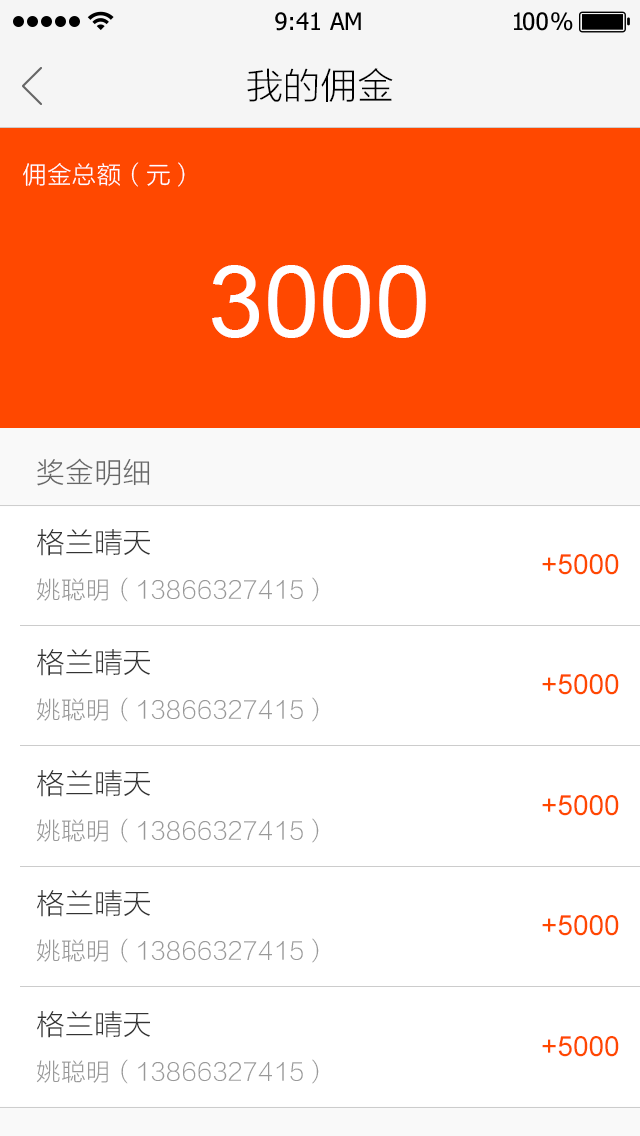
<style>
.page{position:relative;width:640px;height:1136px;background:#ffffff}
.page>*{position:absolute;margin:0}
.t1{font:24px "Tahoma";color:#000000}
.t2{font:24px "Tahoma";letter-spacing:-0.1em;color:#000000}
.t3{font:24px "Tahoma";letter-spacing:-0.25em;color:#000000}
.t4{font:36px "STHeitiSC-Light";color:#000000}
.t5{font:24px "STHeitiSC-Light";color:#ffffff}
.t6{font:100px "ArialMT";color:#ffffff}
.t7{font:28px "STHeitiSC-Light";color:#666666}
.t8{font:28px "STHeitiSC-Light";color:#333333}
.t9{font:28px "ArialMT";color:#ff4800}
.t10{font:24px "STHeitiSC-Light";color:#999999}
</style>
<div class="page">
<p class="t1" style="left:275px;top:12px;width:86px;height:19px">9:41 AM</p>
<p class="t2" style="left:514px;top:12px;width:59px;height:19px">1<span class="t1">0</span><span class="t3">0 </span>%</p>
<p class="t4" style="left:247px;top:68px;width:146px;height:34px">我的佣金</p>
<p class="t5" style="left:23px;top:162px;width:162px;height:25px">佣金总额（元）</p>
<p class="t6" style="left:212px;top:265px;width:214px;height:73px">3000</p>
<p class="t7" style="left:37px;top:458px;width:113px;height:28px">奖金明细</p>
<p class="t8" style="left:37px;top:529px;width:113px;height:27px">格兰晴天</p>
<p class="t9" style="left:542px;top:554px;width:77px;height:21px">+5000</p>
<p class="t10" style="left:36px;top:577px;width:283px;height:25px">姚聪明（13866327415）</p>
<p class="t8" style="left:37px;top:649px;width:113px;height:27px">格兰晴天</p>
<p class="t9" style="left:542px;top:674px;width:77px;height:21px">+5000</p>
<p class="t10" style="left:36px;top:697px;width:283px;height:25px">姚聪明（13866327415）</p>
<p class="t8" style="left:37px;top:770px;width:113px;height:27px">格兰晴天</p>
<p class="t9" style="left:542px;top:795px;width:77px;height:21px">+5000</p>
<p class="t10" style="left:36px;top:818px;width:283px;height:25px">姚聪明（13866327415）</p>
<p class="t8" style="left:37px;top:890px;width:113px;height:27px">格兰晴天</p>
<p class="t9" style="left:542px;top:915px;width:77px;height:21px">+5000</p>
<p class="t10" style="left:36px;top:938px;width:283px;height:25px">姚聪明（13866327415）</p>
<p class="t8" style="left:37px;top:1011px;width:113px;height:27px">格兰晴天</p>
<p class="t9" style="left:542px;top:1036px;width:77px;height:21px">+5000</p>
<p class="t10" style="left:36px;top:1059px;width:283px;height:25px">姚聪明（13866327415）</p>
</div>
